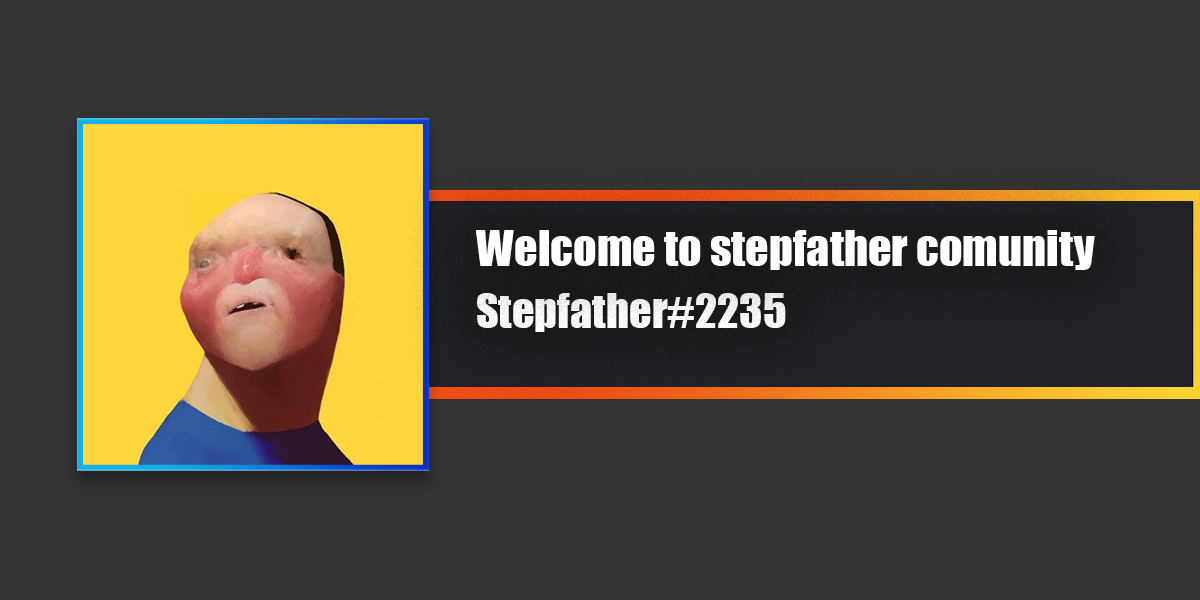
<style>
.page{position:relative;width:1200px;height:600px;background:#333333}
.page>*{position:absolute;margin:0}
.t1{font:46.1px "Impact";color:#fefefe}
.t2{font:44.2px "Impact";color:#ffffff}
</style>
<div class="page">
<p class="t1" style="left:476px;top:230px;width:619px;height:40px">Welcome to stepfather comunity</p>
<p class="t2" style="left:477px;top:293px;width:309px;height:39px">Stepfather#2235</p>
</div>
